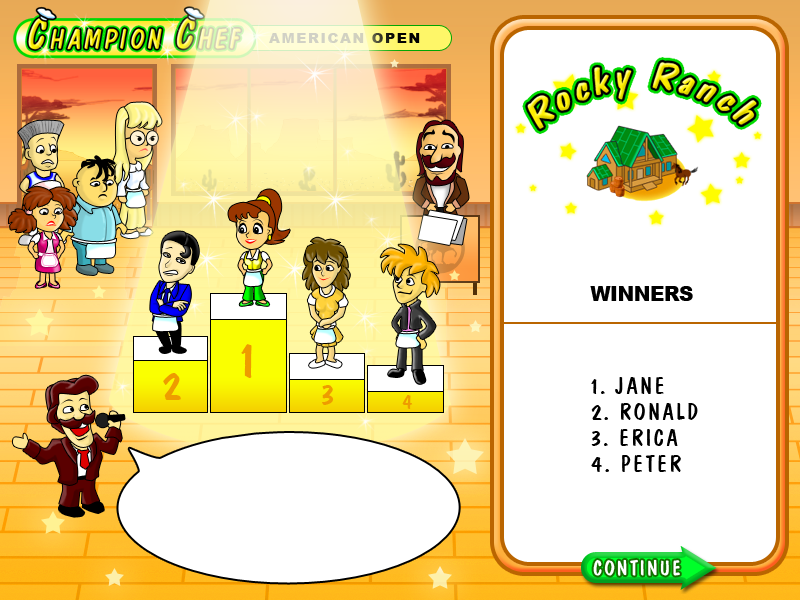
<style>
.page{position:relative;width:800px;height:600px;background:#ffffff}
.page>*{position:absolute;margin:0}
.t1{font:14.4px "Arial-Black";letter-spacing:0.09em;font-variant:small-caps}
.t2{font:19.7px "Arial-Black";letter-spacing:-0.01em;color:#000000;text-transform:uppercase}
.t3{font:52.3px "DomCasualBT-Regular";letter-spacing:0.09em;color:#ee9c00;font-variant:small-caps}
.t4{font:43.3px "DomCasualBT-Regular";letter-spacing:0.09em;color:#ee9c00;font-variant:small-caps}
.t5{font:24.1px/26px "DomCasualBT-Regular";letter-spacing:0.09em;color:#000000;font-variant:small-caps}
.t6{font:31.8px "DomCasualBT-Regular";letter-spacing:0.09em;color:#ee9c00;font-variant:small-caps}
.t7{font:22px "DomCasualBT-Regular";letter-spacing:0.09em;color:#ee9c00;font-variant:small-caps}
</style>
<div class="page">
<p class="t1" style="left:269px;top:33px;width:151px;height:10px">AMERICAN OPEN</p>
<p class="t2" style="left:590px;top:286px;width:103px;height:15px">WINNERS</p>
<p class="t3" style="left:241px;top:344px;width:11px;height:34px">1</p>
<p class="t4" style="left:163px;top:373px;width:18px;height:27px">2</p>
<p class="t5" style="left:591px;top:377px;width:107px;height:95px">1. JANE<br>2. RONALD<br>3. ERICA<br>4. PETER</p>
<p class="t6" style="left:322px;top:385px;width:12px;height:20px">3</p>
<p class="t7" style="left:402px;top:395px;width:11px;height:14px">4</p>
</div>
